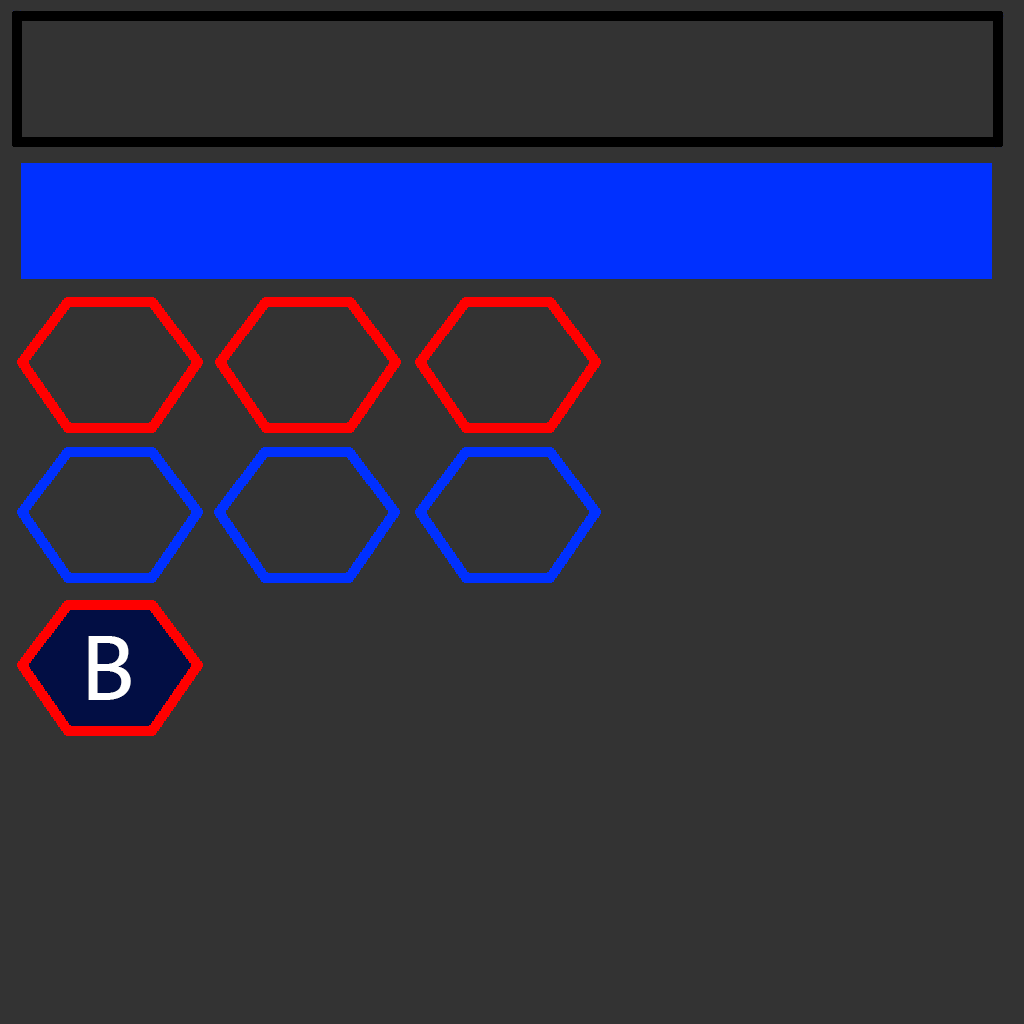
<style>
.page{position:relative;width:1024px;height:1024px;background:#333333}
.page>*{position:absolute;margin:0}
.t1{font:100px "Consolas";color:#ffffff}
</style>
<div class="page">
<p class="t1" style="left:88px;top:636px;width:43px;height:64px">B</p>
</div>
